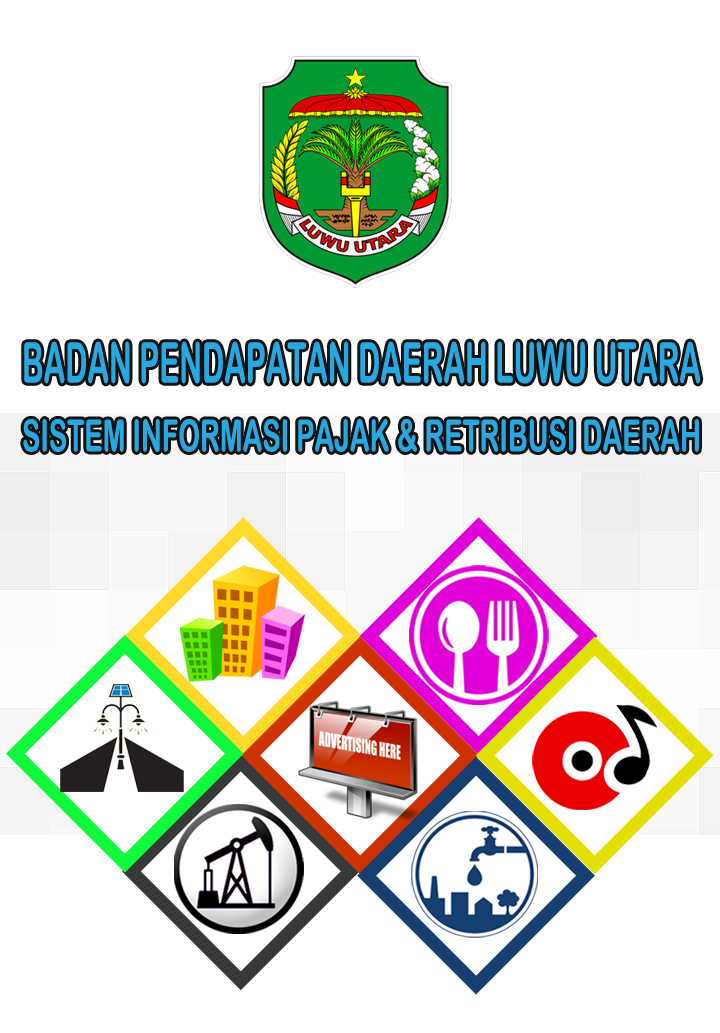
<style>
.page{position:relative;width:720px;height:1033px;background:#ffffff}
.page>*{position:absolute;margin:0}
.t1{font:56.5px "ArialRoundedMTBold";color:#27a8e0;scale:0.53 1}
.t2{font:44.3px "ArialRoundedMTBold";color:#27a8e0;scale:0.62 1}
</style>
<div class="page">
<p class="t1" style="left:24px;top:341px;width:677px;height:43px">BADAN PENDAPATAN DAERAH LUWU UTARA</p>
<p class="t2" style="left:23px;top:419px;width:676px;height:33px">SISTEM INFORMASI PAJAK &amp; RETRIBUSI DAERAH</p>
</div>
